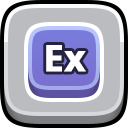
<style>
.page{position:relative;width:128px;height:128px;background:#bbbcbf}
.page>*{position:absolute;margin:0}
.t1{font:36px "NotoSans-Bold";color:#ffffff;font-weight:bold}
</style>
<div class="page">
<p class="t1" style="left:46px;top:45px;width:40px;height:27px">Ex</p>
</div>
